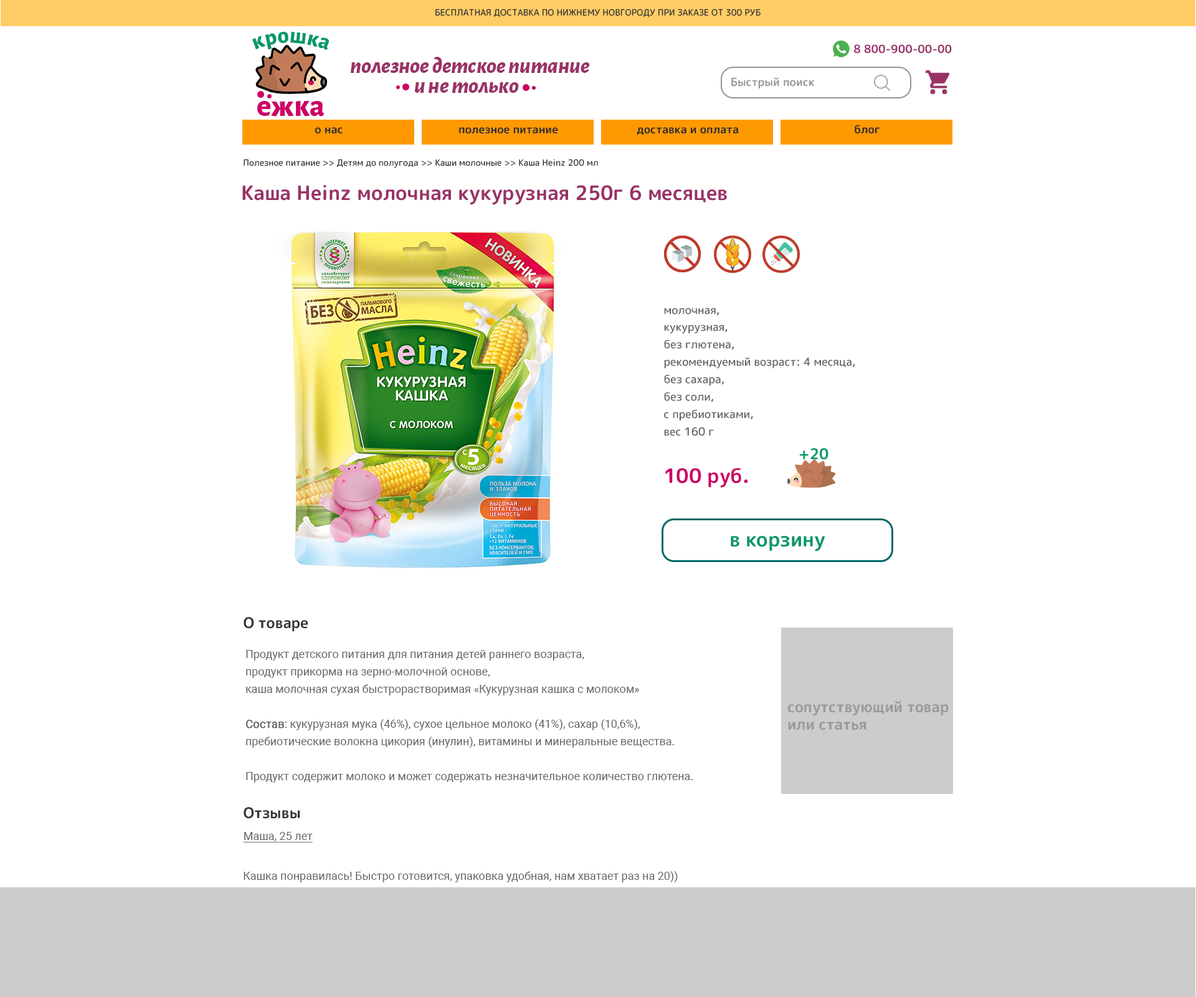
<style>
.page{position:relative;width:1196px;height:997px;background:#ffffff}
.page>*{position:absolute;margin:0}
.t1{font:8.7px "RoundedMplus1c-Medium";color:#333333}
.t2{font:22.9px "AlegreyaSans-ExtraBold";color:#009966}
.t3{font:11.2px "RoundedMplus1c-Bold";color:#993366}
.t4{font:22.4px "AlegreyaSans-ExtraBoldItalic";color:#993366}
.t5{font:11.2px "RoundedMplus1c-Bold";color:#999999}
.t6{font:30.8px "AlegreyaSans-ExtraBold";color:#cc0066}
.t7{font:11.2px "RoundedMplus1c-Bold";color:#302e2e}
.t8{font:19.9px "RoundedMplus1c-Bold";color:#993366}
.t9{font:11.2px/17.4px "RoundedMplus1c-Medium";color:#666666}
.t10{font:15px "RoundedMplus1c-Bold";color:#009966}
.t11{font:19.9px "RoundedMplus1c-Bold";color:#cc0066}
.t12{font:19.9px "RoundedMplus1c-Bold";color:#009966}
.t13{font:15px "RoundedMplus1c-Bold";color:#333333}
.t14{font:11.2px/17.4px "Roboto-Regular";color:#666666}
.t15{font:11.2px/17.4px "Roboto-Regular";color:#666666;font-weight:bold}
.t16{font:15px/17.4px "RoundedMplus1c-Bold";color:#999999}
.t17{font:11.2px "Roboto-Regular";color:#666666;text-decoration:underline}
.t18{font:11.2px "Roboto-Regular";color:#666666}
</style>
<div class="page">
<p class="t1" style="left:435px;top:9px;width:326px;height:8px">БЕСПЛАТНАЯ ДОСТАВКА ПО НИЖНЕМУ НОВГОРОДУ ПРИ ЗАКАЗЕ ОТ 300 РУБ</p>
<p class="t2" style="left:252px;top:32px;width:77px;height:18px">крошка</p>
<p class="t3" style="left:854px;top:44px;width:98px;height:10px">8 800-900-00-00</p>
<p class="t4" style="left:350px;top:57px;width:240px;height:17px">полезное детское питание</p>
<p class="t5" style="left:731px;top:77px;width:83px;height:11px">Быстрый поиск</p>
<p class="t4" style="left:414px;top:82px;width:105px;height:11px">и не только</p>
<p class="t6" style="left:257px;top:101px;width:67px;height:16px">ежка</p>
<p class="t7" style="left:855px;top:125px;width:25px;height:9px">блог</p>
<p class="t7" style="left:315px;top:127px;width:28px;height:7px">о нас</p>
<p class="t7" style="left:459px;top:127px;width:99px;height:7px">полезное питание</p>
<p class="t7" style="left:637px;top:127px;width:101px;height:8px">доставка и оплата</p>
<p class="t1" style="left:244px;top:159px;width:354px;height:9px">Полезное питание &gt;&gt; Детям до полугода &gt;&gt; Каши молочные &gt;&gt; Каша Heinz 200 мл</p>
<p class="t8" style="left:242px;top:185px;width:485px;height:20px">Каша Heinz молочная кукурузная 250г 6 месяцев</p>
<p class="t9" style="left:664px;top:308px;width:191px;height:128px">молочная, <br>кукурузная, <br>без глютена, <br>рекомендуемый возраст: 4 месяца, <br>без сахара, <br>без соли, <br>с пребиотиками, <br>вес 160 г</p>
<p class="t10" style="left:799px;top:448px;width:30px;height:12px">+20</p>
<p class="t11" style="left:665px;top:468px;width:83px;height:20px">100 руб.</p>
<p class="t12" style="left:731px;top:536px;width:94px;height:15px">в корзину</p>
<p class="t13" style="left:244px;top:617px;width:64px;height:15px">О товаре</p>
<p class="t14" style="left:245px;top:650px;width:448px;height:133px">Продукт детского питания для питания детей раннего возраста, <br>продукт прикорма на зерно-молочной основе, <br>каша молочная сухая быстрорастворимая «Кукурузная кашка с молоком»<br><br><span class="t15">Состав</span>: кукурузная мука (46%), сухое цельное молоко (41%), сахар (10,6%), <br>пребиотические волокна цикория (инулин), витамины и минеральные вещества.<br><br>Продукт содержит молоко и может содержать незначительное количество глютена.</p>
<p class="t16" style="left:788px;top:701px;width:161px;height:29px">сопутствующий товар<br>или статья</p>
<p class="t13" style="left:244px;top:807px;width:56px;height:12px">Отзывы</p>
<p class="t17" style="left:243px;top:832px;width:70px;height:10px">Маша, 25 лет</p>
<p class="t18" style="left:244px;top:871px;width:434px;height:11px">Кашка понравилась! Быстро готовится, упаковка удобная, нам хватает раз на 20))</p>
</div>
